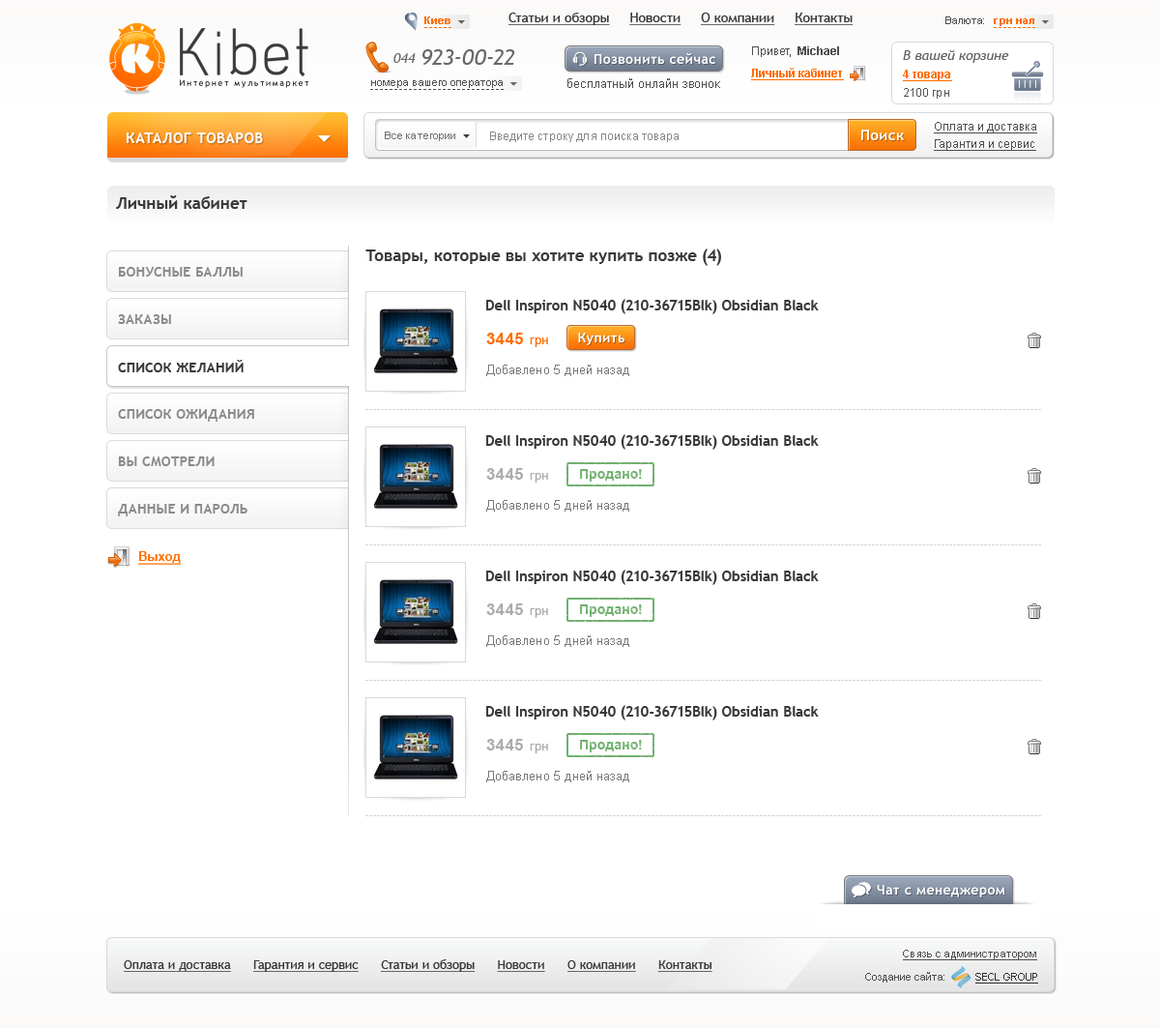
<style>
.page{position:relative;width:1160px;height:1028px;background:#ffffff}
.page>*{position:absolute;margin:0}
.t1{font:10.6px "Arial-BoldMT";color:#ff6e01}
.t2{font:13.5px "TrebuchetMS";color:#393939;text-decoration:underline}
.t3{font:10.6px "ArialMT";color:#4f4f4f}
.t4{font:84.6px "Acid";color:#3b3b3b}
.t5{font:13.5px "TrebuchetMS-Italic";color:#696969}
.t6{font:22.2px "TrebuchetMS-Italic";color:#696969}
.t7{font:13.5px "TrebuchetMS-Bold";letter-spacing:0.03em;color:#ffffff}
.t8{font:11.6px "ArialMT";color:#4f4f4f}
.t9{font:11.6px "Arial-BoldMT";color:#4f4f4f}
.t10{font:13.5px "TrebuchetMS-Italic";color:#616161}
.t11{font:11.6px "Arial-BoldMT";color:#ff6e01;text-decoration:underline}
.t12{font:8.5px "TrebuchetMS";letter-spacing:0.2em;color:#060606}
.t13{font:12.6px "ArialMT";color:#4f4f4f}
.t14{font:11.6px "ArialMT";color:#535353}
.t15{font:11.6px "ArialMT";color:#4f4f4f;text-decoration:underline}
.t16{font:14.5px "TrebuchetMS-Bold";letter-spacing:0.03em;color:#ffffff}
.t17{font:10.6px "ArialMT";color:#727272}
.t18{font:11.6px "ArialMT";color:#888888}
.t19{font:16.4px "TrebuchetMS-Bold";color:#393939}
.t20{font:13.5px "TrebuchetMS-Bold";letter-spacing:0.02em;color:#8b8b8b}
.t21{font:14.5px "TrebuchetMS-Bold";color:#393939}
.t22{font:16.4px "Arial-BoldMT";color:#ff6e01}
.t23{font:12.6px "ArialMT";color:#ff6e01}
.t24{font:13.5px "TrebuchetMS-Bold";letter-spacing:0.02em;color:#393939}
.t25{font:12.6px "ArialMT";color:#797979}
.t26{font:16.4px "Arial-BoldMT";color:#acacac}
.t27{font:12.6px "ArialMT";color:#acacac}
.t28{font:12.6px "Arial-BoldMT";color:#ff6e01;text-decoration:underline}
.t29{font:10.6px "ArialMT";color:#4f4f4f;text-decoration:underline}
.t30{font:12.6px "TrebuchetMS";color:#393939;text-decoration:underline}
.t31{font:10.6px "ArialMT";color:#303030;text-decoration:underline}
</style>
<div class="page">
<p class="t1" style="left:424px;top:16px;width:27px;height:8px">Киев</p>
<p class="t2" style="left:509px;top:13px;width:345px;height:12px">Статьи и обзоры     Новости     О компании     Контакты</p>
<p class="t3" style="left:946px;top:16px;width:38px;height:8px">Валюта:</p>
<p class="t4" style="left:180px;top:28px;width:128px;height:48px">Kibet</p>
<p class="t1" style="left:994px;top:18px;width:41px;height:8px">грн нал</p>
<p class="t5" style="left:394px;top:53px;width:22px;height:10px">044</p>
<p class="t6" style="left:423px;top:49px;width:92px;height:16px">923-00-22</p>
<p class="t7" style="left:595px;top:52px;width:120px;height:12px">Позвонить сейчас</p>
<p class="t8" style="left:752px;top:46px;width:87px;height:11px">Привет,  <span class="t9">Michael</span></p>
<p class="t10" style="left:903px;top:50px;width:106px;height:13px">В вашей корзине</p>
<p class="t11" style="left:751px;top:68px;width:93px;height:12px">Личный кабинет</p>
<p class="t11" style="left:903px;top:70px;width:49px;height:11px">4 товара</p>
<p class="t12" style="left:180px;top:79px;width:129px;height:9px">Интернет мультимаркет</p>
<p class="t3" style="left:371px;top:80px;width:132px;height:8px">номера вашего оператора</p>
<p class="t13" style="left:568px;top:78px;width:152px;height:10px">бесплатный онлайн звонок</p>
<p class="t14" style="left:904px;top:88px;width:45px;height:11px">2100 грн</p>
<p class="t15" style="left:934px;top:122px;width:103px;height:11px">Оплата и доставка</p>
<p class="t16" style="left:126px;top:132px;width:137px;height:11px">КАТАЛОГ ТОВАРОВ</p>
<p class="t17" style="left:385px;top:131px;width:70px;height:10px">Все категории</p>
<p class="t18" style="left:490px;top:131px;width:189px;height:11px">Введите строку для поиска товара</p>
<p class="t16" style="left:861px;top:130px;width:43px;height:10px">Поиск</p>
<p class="t15" style="left:934px;top:139px;width:102px;height:12px">Гарантия и сервис</p>
<p class="t19" style="left:116px;top:195px;width:132px;height:14px">Личный кабинет</p>
<p class="t19" style="left:365px;top:248px;width:356px;height:18px">Товары, которые вы хотите купить позже (4)</p>
<p class="t20" style="left:118px;top:267px;width:125px;height:10px">БОНУСНЫЕ БАЛЛЫ</p>
<p class="t21" style="left:486px;top:299px;width:333px;height:15px">Dell Inspiron N5040 (210-36715Blk) Obsidian Black</p>
<p class="t20" style="left:118px;top:314px;width:53px;height:10px">ЗАКАЗЫ</p>
<p class="t22" style="left:486px;top:333px;width:62px;height:14px">3445  <span class="t23">грн</span></p>
<p class="t7" style="left:578px;top:333px;width:47px;height:12px">Купить</p>
<p class="t24" style="left:118px;top:360px;width:126px;height:12px">СПИСОК ЖЕЛАНИЙ</p>
<p class="t25" style="left:486px;top:365px;width:143px;height:11px">Добавлено 5 дней назад</p>
<p class="t20" style="left:118px;top:409px;width:136px;height:13px">СПИСОК ОЖИДАНИЯ</p>
<p class="t21" style="left:486px;top:434px;width:333px;height:16px">Dell Inspiron N5040 (210-36715Blk) Obsidian Black</p>
<p class="t20" style="left:118px;top:456px;width:97px;height:10px">ВЫ СМОТРЕЛИ</p>
<p class="t26" style="left:486px;top:468px;width:62px;height:14px">3445  <span class="t27">грн</span></p>
<p class="t20" style="left:118px;top:504px;width:130px;height:12px">ДАННЫЕ И ПАРОЛЬ</p>
<p class="t25" style="left:486px;top:500px;width:143px;height:11px">Добавлено 5 дней назад</p>
<p class="t28" style="left:138px;top:551px;width:43px;height:14px">Выход</p>
<p class="t21" style="left:486px;top:569px;width:333px;height:16px">Dell Inspiron N5040 (210-36715Blk) Obsidian Black</p>
<p class="t26" style="left:486px;top:603px;width:62px;height:15px">3445  <span class="t27">грн</span></p>
<p class="t25" style="left:486px;top:635px;width:143px;height:12px">Добавлено 5 дней назад</p>
<p class="t21" style="left:486px;top:705px;width:333px;height:15px">Dell Inspiron N5040 (210-36715Blk) Obsidian Black</p>
<p class="t26" style="left:486px;top:739px;width:62px;height:14px">3445  <span class="t27">грн</span></p>
<p class="t25" style="left:486px;top:771px;width:143px;height:11px">Добавлено 5 дней назад</p>
<p class="t7" style="left:877px;top:885px;width:129px;height:12px">Чат с менеджером</p>
<p class="t29" style="left:903px;top:949px;width:134px;height:11px">Связь с администратором</p>
<p class="t30" style="left:124px;top:959px;width:589px;height:13px">Оплата и доставка      Гарантия и сервис      Статьи и обзоры      Новости      О компании      Контакты</p>
<p class="t3" style="left:865px;top:972px;width:80px;height:10px">Создание сайта:</p>
<p class="t31" style="left:976px;top:973px;width:62px;height:10px">SECL GROUP</p>
</div>
